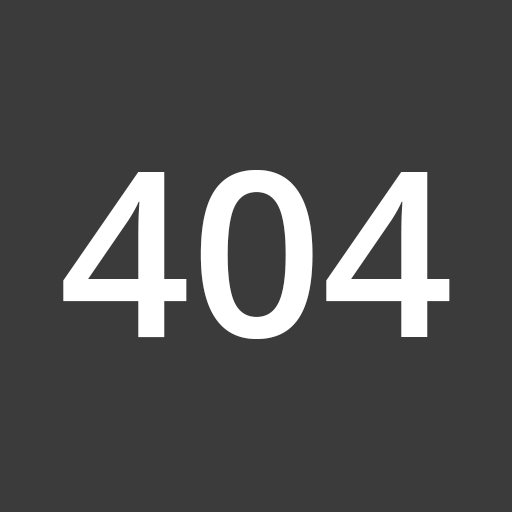
<style>
.page{position:relative;width:512px;height:512px;background:#3b3b3b}
.page>*{position:absolute;margin:0}
.t1{font:230.1px "OpenSans-Semibold";color:#ffffff}
</style>
<div class="page">
<p class="t1" style="left:63px;top:170px;width:387px;height:169px">404</p>
</div>
